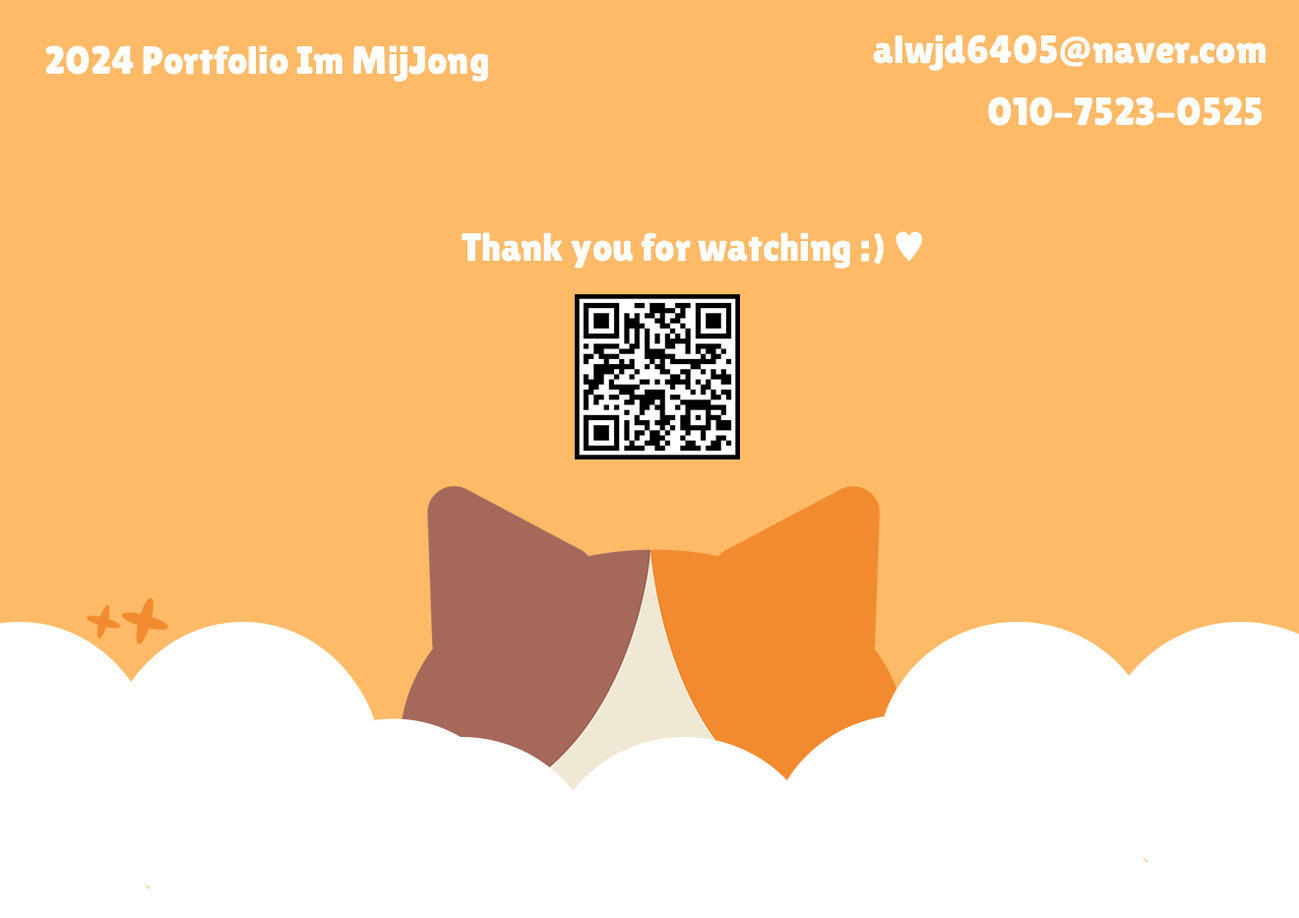
<style>
.page{position:relative;width:1299px;height:918px;background:#feba67}
.page>*{position:absolute;margin:0}
.t1{font:39.4px "LilitaOne";color:#ffffff}
.t2{font:39.4px "Gulim";color:#ffffff}
</style>
<div class="page">
<p class="t1" style="left:873px;top:34px;width:392px;height:37px">alwjd6405@naver.com</p>
<p class="t1" style="left:45px;top:45px;width:443px;height:37px">2024 Portfolio Im MijJong</p>
<p class="t1" style="left:988px;top:96px;width:273px;height:30px">010-7523-0525</p>
<p class="t1" style="left:461px;top:231px;width:461px;height:38px">Thank you for watching :) <span class="t2">♥</span></p>
</div>
